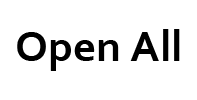
<style>
.page{position:relative;width:197px;height:100px;background:#ffffff}
.page>*{position:absolute;margin:0}
.t1{font:45.1px "Corbel-Bold";color:#000000}
</style>
<div class="page">
<p class="t1" style="left:17px;top:29px;width:163px;height:42px">Open All</p>
</div>
